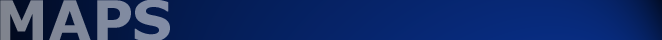
<style>
.page{position:relative;width:662px;height:40px}
.page>*{position:absolute;margin:0}
.t1{font:56px "Verdana-Bold";letter-spacing:-0.005em;color:#81899b}
</style>
<div class="page">
<p class="t1" style="left:0px;top:0px;width:170px;height:42px">MAPS</p>
</div>
